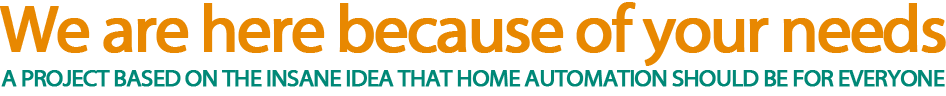
<style>
.page{position:relative;width:946px;height:96px;background:#ffffff}
.page>*{position:absolute;margin:0}
.t1{font:67px "MyriadWebPro";letter-spacing:-0.055em;color:#e88801;font-weight:bold}
.t2{font:24.2px "MyriadWebPro";letter-spacing:-0.055em;color:#008877;font-weight:bold}
</style>
<div class="page">
<p class="t1" style="left:0px;top:2px;width:946px;height:64px">We are here because of your needs</p>
<p class="t2" style="left:1px;top:70px;width:944px;height:17px">A PROJECT BASED ON THE INSANE IDEA THAT HOME AUTOMATION SHOULD BE FOR EVERYONE</p>
</div>
